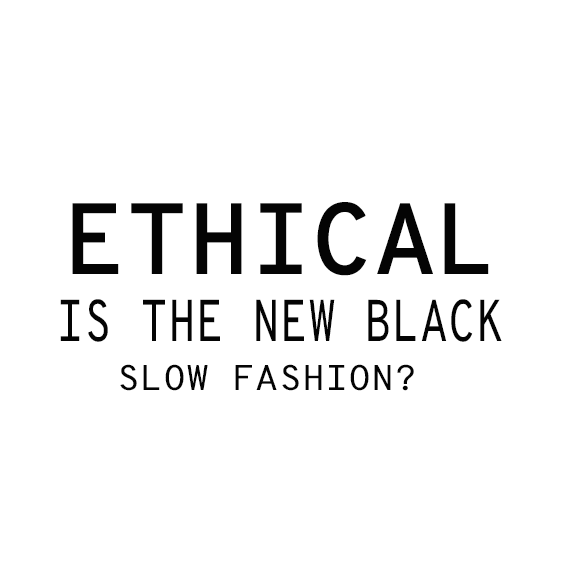
<style>
.page{position:relative;width:564px;height:564px;background:#ffffff}
.page>*{position:absolute;margin:0}
.t1{font:101px "OverpassMono-SemiBold";color:#040404}
.t2{font:58.6px "OverpassMono-Regular";color:#040404;scale:0.78 1}
.t3{font:35.8px "OverpassMono-Regular";color:#040404;scale:1.05 1}
</style>
<div class="page">
<p class="t1" style="left:72px;top:202px;width:417px;height:74px">ETHICAL</p>
<p class="t2" style="left:60px;top:299px;width:442px;height:43px">IS THE NEW BLACK</p>
<p class="t3" style="left:120px;top:364px;width:294px;height:27px">SLOW FASHION?</p>
</div>
